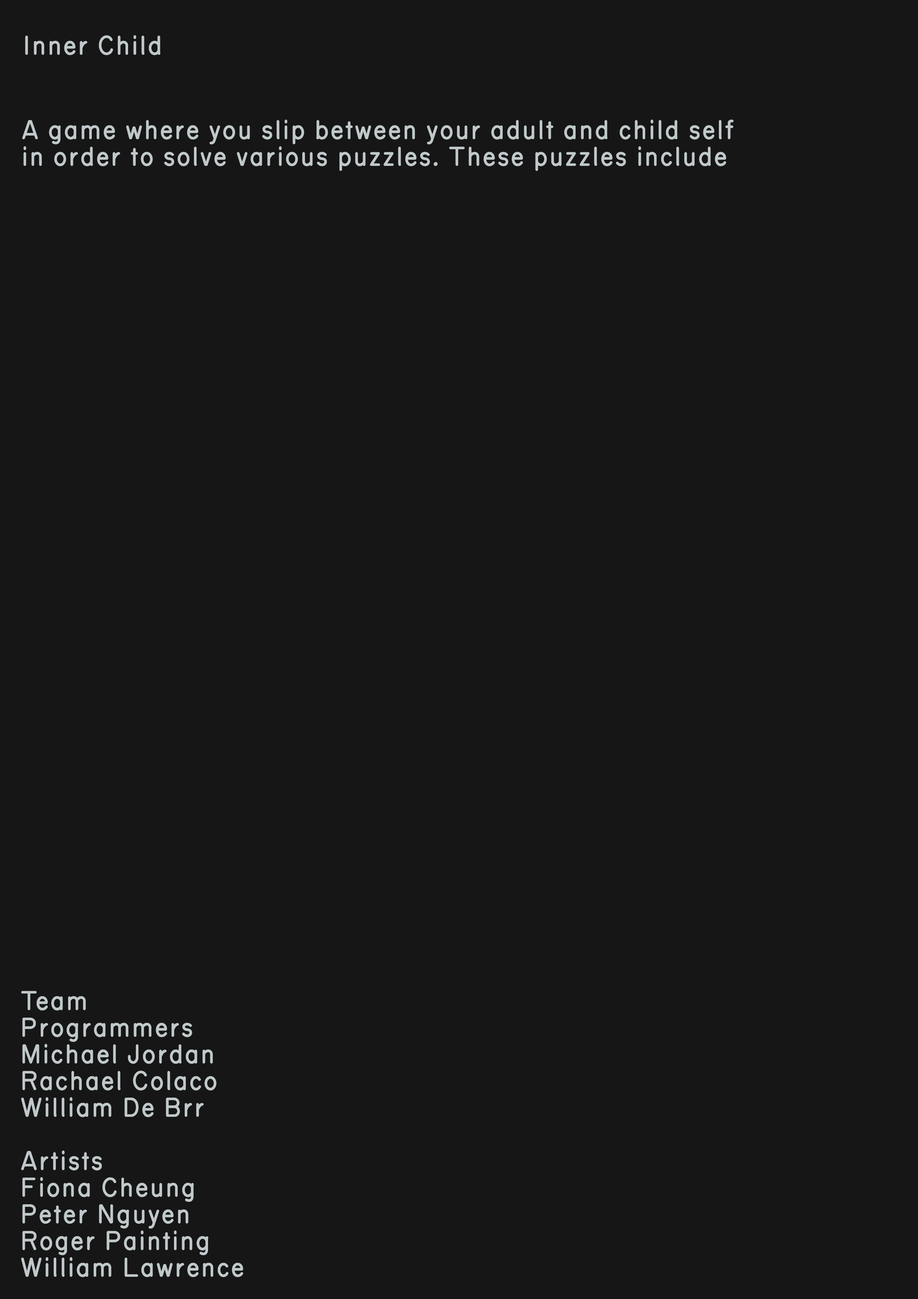
<style>
.page{position:relative;width:918px;height:1299px;background:#161616}
.page>*{position:absolute;margin:0}
.t1{font:26.7px "RoutedGothic";letter-spacing:0.02em;color:#c0c8ca}
.t2{font:26.7px/26.7px "RoutedGothic";letter-spacing:0.02em;color:#c0c8ca}
</style>
<div class="page">
<p class="t1" style="left:25px;top:35px;width:135px;height:20px">Inner Child</p>
<p class="t2" style="left:22px;top:120px;width:712px;height:51px">A game where you slip between your adult and child self<br>in order to solve various puzzles. These puzzles include</p>
<p class="t2" style="left:21px;top:991px;width:222px;height:286px">Team<br>Programmers<br>Michael Jordan<br>Rachael Colaco<br>William De Brr<br><br>Artists<br>Fiona Cheung<br>Peter Nguyen<br>Roger Painting<br>William Lawrence</p>
</div>
